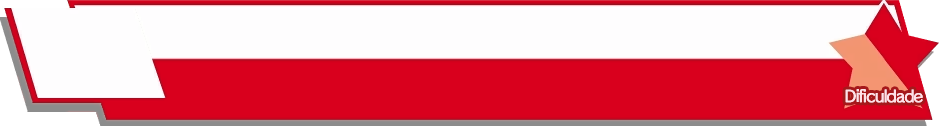
<style>
.page{position:relative;width:939px;height:126px;background:#fefdfe}
.page>*{position:absolute;margin:0}
.t1{font:16px "RodinPro-M";letter-spacing:-0.06em;color:#ffe1e8;font-weight:bold}
</style>
<div class="page">
<p class="t1" style="left:845px;top:89px;width:78px;height:14px">Dificuldade</p>
</div>
